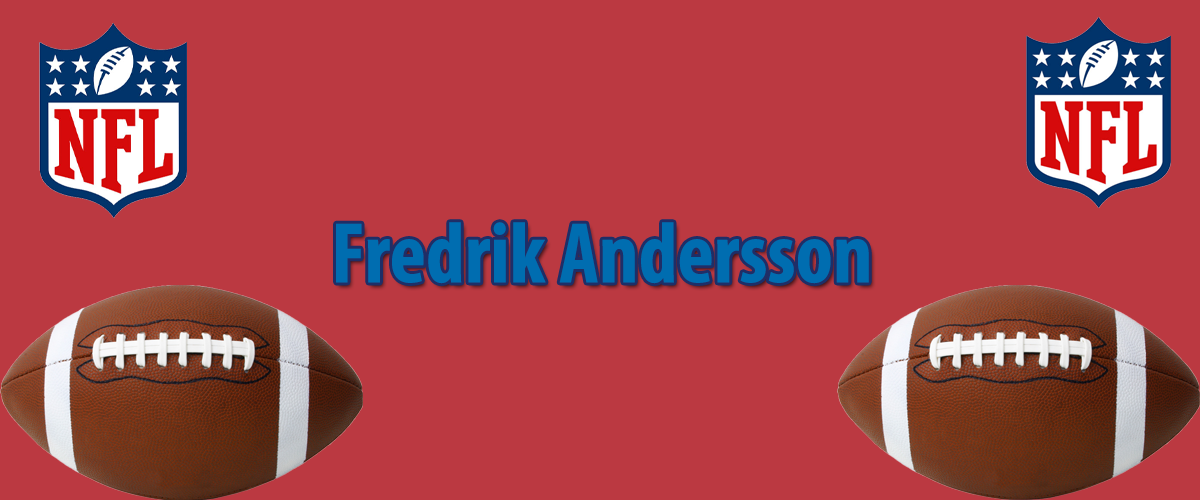
<style>
.page{position:relative;width:1200px;height:500px;background:#bb3941}
.page>*{position:absolute;margin:0}
.t1{font:86.8px "MyriadPro-BoldCond";color:#006db0}
</style>
<div class="page">
<p class="t1" style="left:336px;top:222px;width:533px;height:62px">Fredrik Andersson</p>
</div>
